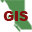
<style>
.page{position:relative;width:32px;height:32px;background:#ffffff}
.page>*{position:absolute;margin:0}
.t1{font:13px "Arial-Black";color:#870f0f}
</style>
<div class="page">
<p class="t1" style="left:3px;top:11px;width:25px;height:10px">GIS</p>
</div>
